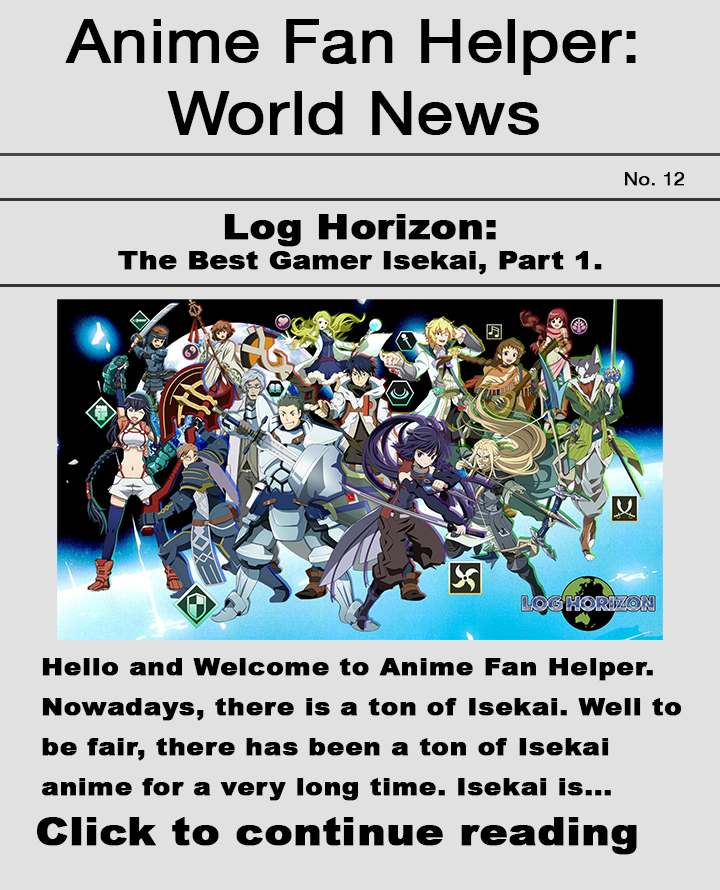
<style>
.page{position:relative;width:720px;height:890px;background:#e1e1e1}
.page>*{position:absolute;margin:0}
.t1{font:60px "HelveticaNeue";color:#000000;font-weight:bold;scale:1.1 1}
.t2{font:18px "HelveticaNeue";color:#000000;font-weight:bold;scale:1.1 1}
.t3{font:25px "Arial-Black";color:#000000;font-weight:bold;scale:1.1 1}
.t4{font:35px "Arial-Black";color:#000000;font-weight:bold;scale:1.1 1}
.t5{font:24px/40px "Arial-Black";color:#000000;font-weight:bold;scale:1.1 1}
.t6{font:38px "Arial-Black";color:#000000;font-weight:bold;scale:1.1 1}
</style>
<div class="page">
<p class="t1" style="left:65px;top:19px;width:571px;height:116px;text-align:center">Anime Fan Helper: World News</p>
<p class="t2" style="left:625px;top:172px;width:60px;height:14px">No. 12</p>
<p class="t3" style="left:118px;top:214px;width:484px;height:61px;text-align:center"><span class="t4">Log Horizon: </span><br>The Best Gamer Isekai, Part 1.</p>
<p class="t5" style="left:41px;top:658px;width:641px;height:143px">Hello and Welcome to Anime Fan Helper. Nowadays, there is a ton of Isekai. Well to be fair, there has been a ton of Isekai anime for a very long time. Isekai is...</p>
<p class="t6" style="left:37px;top:817px;width:600px;height:38px">Click to continue reading</p>
</div>
